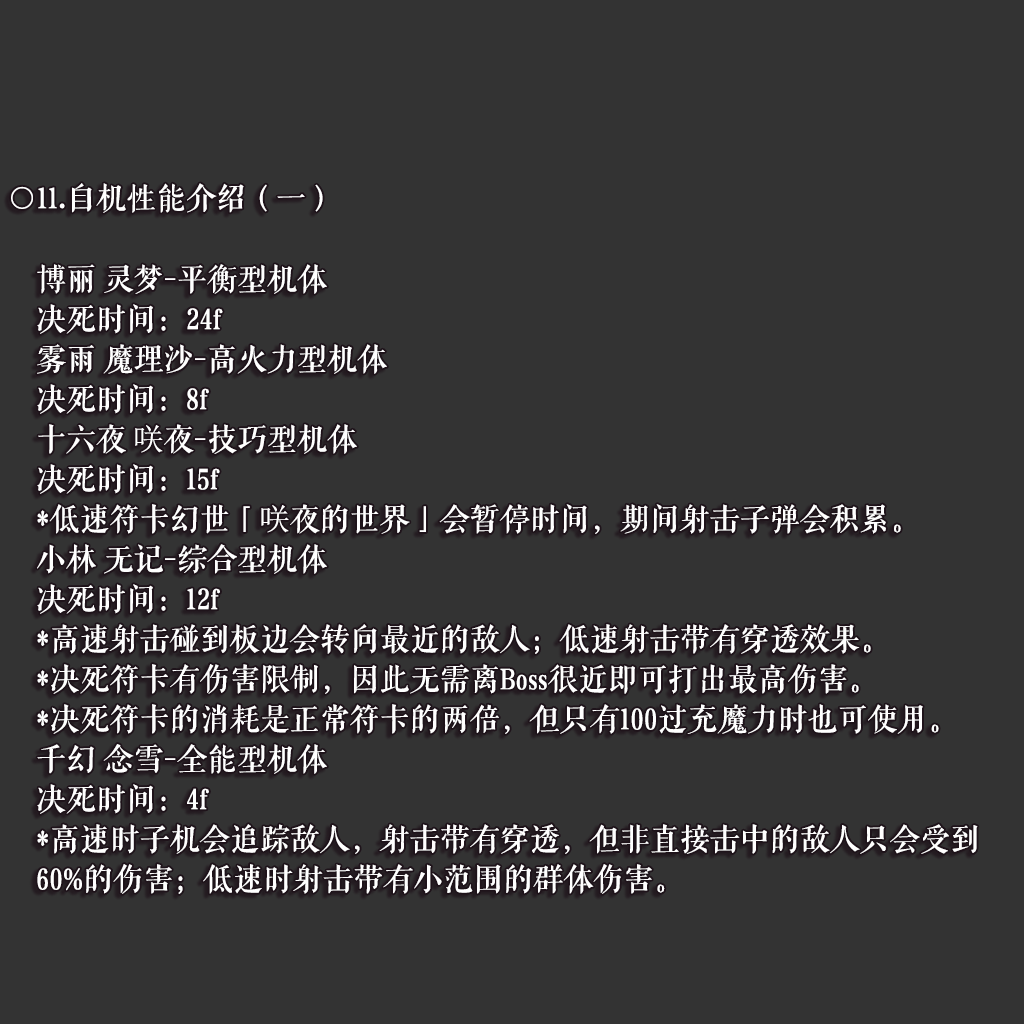
<style>
.page{position:relative;width:1024px;height:1024px;background:#333333}
.page>*{position:absolute;margin:0}
.t1{font:30px "FZQKBYSJW--GB1-0";color:#ffffff}
.t2{font:30px "SimSun";color:#ffffff}
</style>
<div class="page">
<p class="t1" style="left:11px;top:183px;width:312px;height:30px">○11.自机性能介绍（一）</p>
<p class="t1" style="left:37px;top:264px;width:290px;height:30px">博丽 灵梦-平衡型机体</p>
<p class="t1" style="left:37px;top:304px;width:186px;height:30px">决死时间：24f</p>
<p class="t1" style="left:37px;top:344px;width:350px;height:30px">雾雨 魔理沙-高火力型机体</p>
<p class="t1" style="left:37px;top:384px;width:172px;height:30px">决死时间：8f</p>
<p class="t1" style="left:38px;top:424px;width:319px;height:30px">十六夜 <span class="t2">咲</span>夜-技巧型机体</p>
<p class="t1" style="left:37px;top:464px;width:183px;height:30px">决死时间：15f</p>
<p class="t1" style="left:37px;top:504px;width:864px;height:30px">*低速符卡幻世「<span class="t2">咲</span>夜的世界」会暂停时间，期间射击子弹会积累。</p>
<p class="t1" style="left:37px;top:544px;width:290px;height:30px">小林 无记-综合型机体</p>
<p class="t1" style="left:37px;top:584px;width:183px;height:30px">决死时间：12f</p>
<p class="t1" style="left:37px;top:624px;width:834px;height:30px">*高速射击碰到板边会转向最近的敌人；低速射击带有穿透效果。</p>
<p class="t1" style="left:37px;top:664px;width:822px;height:30px">*决死符卡有伤害限制，因此无需离Boss很近即可打出最高伤害。</p>
<p class="t1" style="left:37px;top:704px;width:902px;height:30px">*决死符卡的消耗是正常符卡的两倍，但只有100过充魔力时也可使用。</p>
<p class="t1" style="left:37px;top:744px;width:290px;height:30px">千幻 念雪-全能型机体</p>
<p class="t1" style="left:37px;top:784px;width:172px;height:30px">决死时间：4f</p>
<p class="t1" style="left:37px;top:824px;width:941px;height:30px">*高速时子机会追踪敌人，射击带有穿透，但非直接击中的敌人只会受到</p>
<p class="t1" style="left:37px;top:864px;width:628px;height:30px">60%的伤害；低速时射击带有小范围的群体伤害。</p>
</div>
